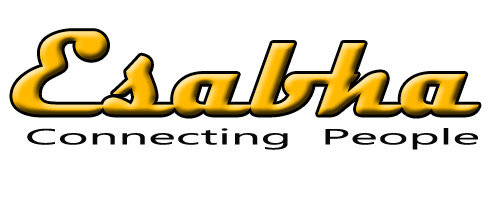
<style>
.page{position:relative;width:500px;height:200px;background:#ffffff}
.page>*{position:absolute;margin:0}
.t1{font:120.8px "Magneto-Bold"}
.t2{font:21.9px "MyanmarText";color:#080808;scale:2.41 1}
</style>
<div class="page">
<p class="t1" style="left:12px;top:31px;width:467px;height:85px">Esabha</p>
<p class="t2" style="left:27px;top:128px;width:451px;height:22px">Connecting  People</p>
</div>
